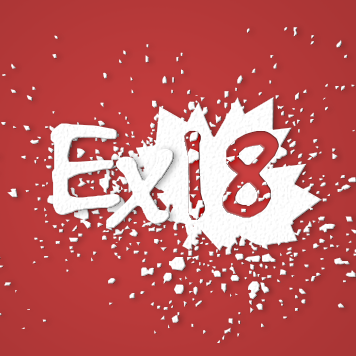
<style>
.page{position:relative;width:356px;height:356px}
.page>*{position:absolute;margin:0}
.t1{font:150px "BuxtonSketch";color:#ffffff;scale:1.24 1}
.t2{font:144px "BuxtonSketch";letter-spacing:0.05em}
</style>
<div class="page">
<p class="t1" style="left:50px;top:123px;width:71px;height:92px">E</p>
<p class="t2" style="left:184px;top:130px;width:95px;height:90px">18</p>
<p class="t1" style="left:106px;top:149px;width:68px;height:79px">x</p>
</div>
